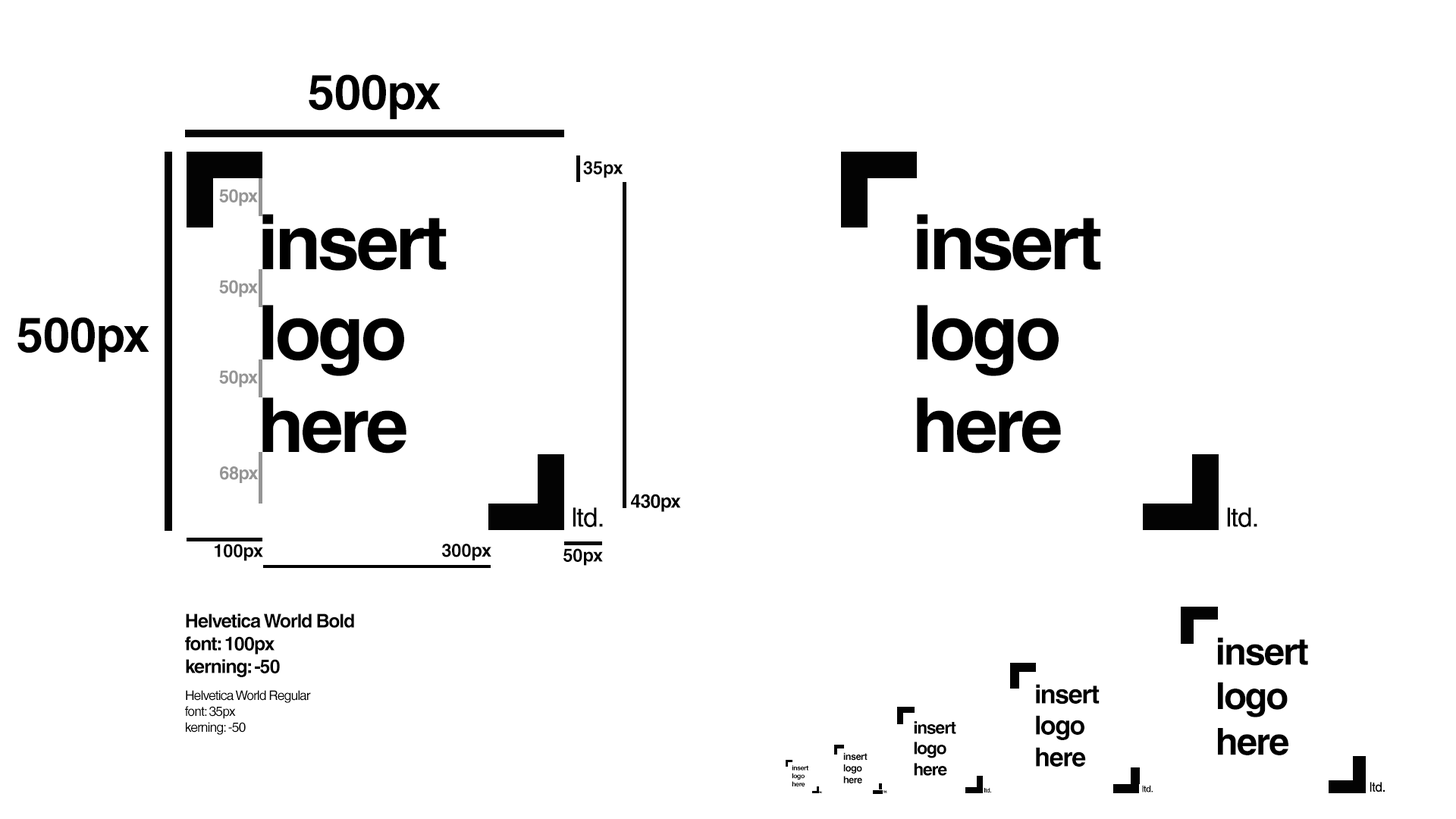
<style>
.page{position:relative;width:1456px;height:819px;background:#ffffff}
.page>*{position:absolute;margin:0}
.t1{font:48.5px "HelveticaWorld-Bold";letter-spacing:-0.03em;color:#000000}
.t2{font:18.2px "HelveticaWorld-Bold";letter-spacing:-0.03em;color:#000000}
.t3{font:18.2px "HelveticaWorld-Bold";letter-spacing:-0.05em;color:#959595}
.t4{font:75.8px "HelveticaWorld-Bold";letter-spacing:-0.05em;color:#000000}
.t5{font:19px "HelveticaWorld-Bold";letter-spacing:-0.05em;color:#000000}
.t6{font:26.5px "HelveticaWorld-Regular";letter-spacing:-0.03em;color:#000000}
.t7{font:13.3px "HelveticaWorld-Regular";letter-spacing:-0.05em;color:#000000}
.t8{font:37.4px "HelveticaWorld-Bold";letter-spacing:-0.05em;color:#000000}
.t9{font:26.1px "HelveticaWorld-Bold";letter-spacing:-0.05em;color:#000000}
.t10{font:17.3px "HelveticaWorld-Bold";letter-spacing:-0.05em;color:#000000}
.t11{font:9.7px "HelveticaWorld-Bold";letter-spacing:-0.05em;color:#000000}
.t12{font:6.7px "HelveticaWorld-Bold";letter-spacing:-0.05em;color:#000000}
.t13{font:9.1px "HelveticaWorld-Regular";letter-spacing:-0.03em;color:#000000}
.t14{font:13.1px "HelveticaWorld-Regular";letter-spacing:-0.03em;color:#000000}
.t15{font:2.3px "HelveticaWorld-Regular";letter-spacing:-0.03em;color:#000000}
.t16{font:3.4px "HelveticaWorld-Regular";letter-spacing:-0.03em;color:#232323}
.t17{font:6.1px "HelveticaWorld-Regular";letter-spacing:-0.03em;color:#000000}
</style>
<div class="page">
<p class="t1" style="left:309px;top:74px;width:132px;height:46px">500px</p>
<p class="t2" style="left:583px;top:161px;width:40px;height:17px">35px</p>
<p class="t3" style="left:219px;top:189px;width:39px;height:17px">50px</p>
<p class="t4" style="left:262px;top:214px;width:185px;height:57px">insert</p>
<p class="t4" style="left:917px;top:214px;width:184px;height:57px">insert</p>
<p class="t3" style="left:219px;top:280px;width:39px;height:17px">50px</p>
<p class="t4" style="left:262px;top:305px;width:142px;height:71px">logo</p>
<p class="t4" style="left:917px;top:305px;width:142px;height:71px">logo</p>
<p class="t1" style="left:17px;top:317px;width:132px;height:45px">500px</p>
<p class="t3" style="left:219px;top:370px;width:39px;height:18px">50px</p>
<p class="t4" style="left:262px;top:397px;width:144px;height:56px">here</p>
<p class="t4" style="left:917px;top:397px;width:144px;height:56px">here</p>
<p class="t3" style="left:220px;top:466px;width:39px;height:17px">68px</p>
<p class="t5" style="left:631px;top:494px;width:50px;height:18px">430px</p>
<p class="t6" style="left:573px;top:507px;width:30px;height:21px">ltd.</p>
<p class="t6" style="left:1227px;top:507px;width:30px;height:21px">ltd.</p>
<p class="t2" style="left:215px;top:544px;width:48px;height:17px">100px</p>
<p class="t2" style="left:442px;top:544px;width:49px;height:16px">300px</p>
<p class="t2" style="left:563px;top:548px;width:40px;height:18px">50px</p>
<p class="t7" style="left:185px;top:613px;width:169px;height:122px"><span class="t5">Helvetica World Bold<br>font: 100px<br>kerning: -50<br><br></span>Helvetica World Regular<br>font: 35px<br>kerning: -50</p>
<p class="t8" style="left:1218px;top:637px;width:90px;height:29px">insert</p>
<p class="t9" style="left:1036px;top:684px;width:64px;height:20px">insert</p>
<p class="t8" style="left:1218px;top:682px;width:70px;height:35px">logo</p>
<p class="t10" style="left:914px;top:721px;width:42px;height:13px">insert</p>
<p class="t9" style="left:1036px;top:715px;width:48px;height:25px">logo</p>
<p class="t8" style="left:1218px;top:728px;width:70px;height:27px">here</p>
<p class="t10" style="left:914px;top:742px;width:32px;height:16px">logo</p>
<p class="t9" style="left:1036px;top:747px;width:50px;height:20px">here</p>
<p class="t11" style="left:843px;top:752px;width:25px;height:9px">insert</p>
<p class="t12" style="left:792px;top:765px;width:16px;height:5px">insert</p>
<p class="t12" style="left:792px;top:773px;width:13px;height:7px">logo</p>
<p class="t11" style="left:843px;top:764px;width:19px;height:9px">logo</p>
<p class="t10" style="left:914px;top:763px;width:33px;height:13px">here</p>
<p class="t12" style="left:792px;top:781px;width:13px;height:5px">here</p>
<p class="t11" style="left:843px;top:776px;width:19px;height:7px">here</p>
<p class="t13" style="left:1142px;top:785px;width:11px;height:7px">ltd.</p>
<p class="t14" style="left:1370px;top:782px;width:15px;height:10px">ltd.</p>
<p class="t15" style="left:819px;top:791px;width:3px;height:2px">ltd.</p>
<p class="t16" style="left:883px;top:790px;width:4px;height:3px">ltd.</p>
<p class="t17" style="left:984px;top:788px;width:7px;height:5px">ltd.</p>
</div>
